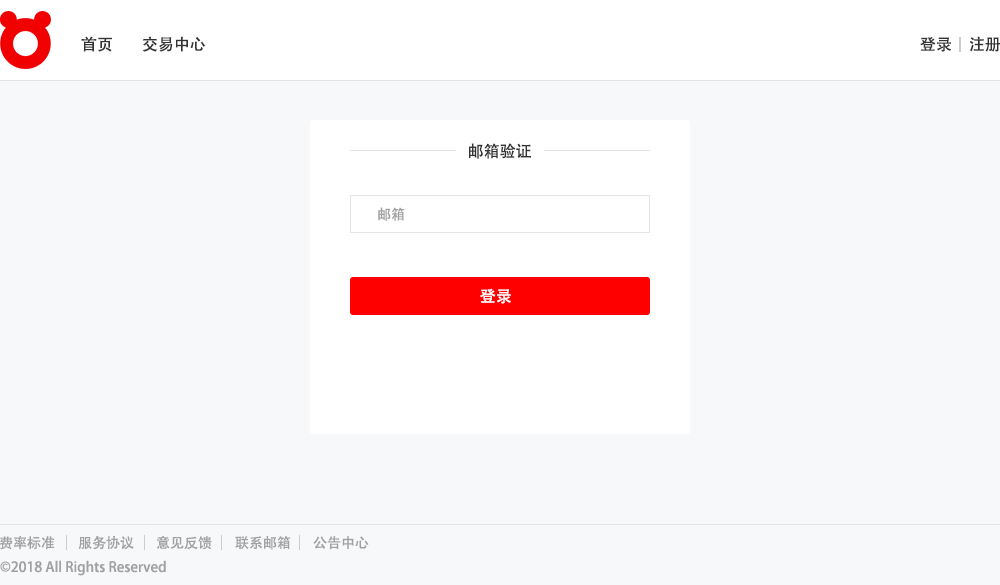
<style>
.page{position:relative;width:1000px;height:585px;background:#f6f8f9}
.page>*{position:absolute;margin:0}
.t1{font:16px "AdobeHeitiStd-Regular";color:#333333}
.t2{font:14px "AdobeHeitiStd-Regular";color:#a1a1a1}
.t3{font:16px "AdobeHeitiStd-Regular";color:#ffffff}
</style>
<div class="page">
<p class="t1" style="left:81px;top:36px;width:31px;height:16px">首页</p>
<p class="t1" style="left:143px;top:36px;width:63px;height:16px">交易中心</p>
<p class="t1" style="left:920px;top:37px;width:31px;height:15px">登录</p>
<p class="t1" style="left:969px;top:36px;width:32px;height:16px">注册</p>
<p class="t1" style="left:469px;top:143px;width:62px;height:16px">邮箱验证</p>
<p class="t2" style="left:378px;top:207px;width:27px;height:14px">邮箱</p>
<p class="t3" style="left:480px;top:288px;width:31px;height:16px">登录</p>
<p class="t2" style="left:0px;top:536px;width:55px;height:14px">费率标准</p>
<p class="t2" style="left:78px;top:536px;width:56px;height:14px">服务协议</p>
<p class="t2" style="left:157px;top:536px;width:55px;height:14px">意见反馈</p>
<p class="t2" style="left:235px;top:536px;width:56px;height:14px">联系邮箱</p>
<p class="t2" style="left:313px;top:536px;width:56px;height:14px">公告中心</p>
<p class="t2" style="left:0px;top:560px;width:166px;height:16px">©2018 All Rights Reserved</p>
</div>
